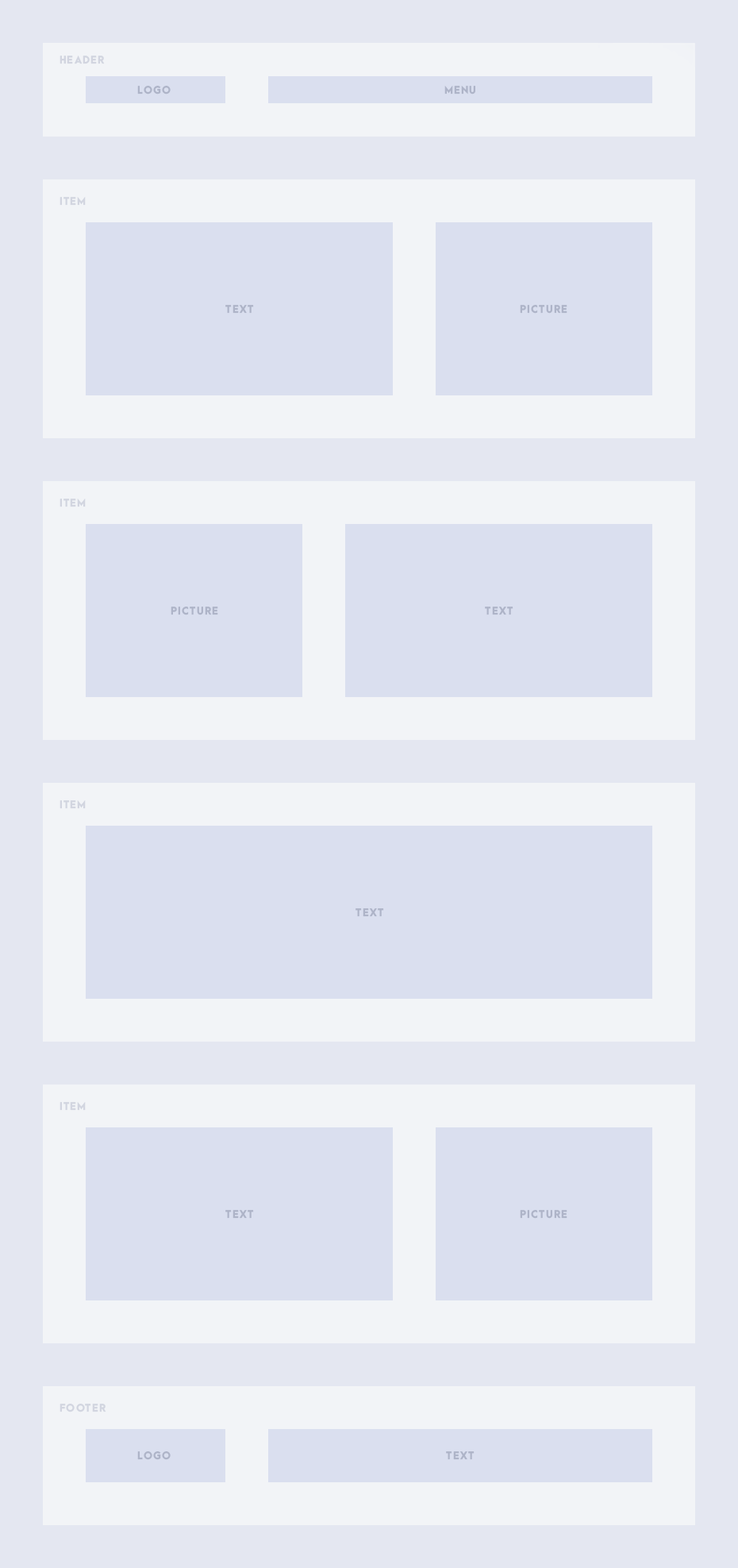
<style>
.page{position:relative;width:738px;height:1568px;background:#dadfef}
.page>*{position:absolute;margin:0}
.t1{font:9.5px "ArcaMajora3-Heavy";letter-spacing:0.1em;color:#d2d5e0}
.t2{font:9.5px "ArcaMajora3-Heavy";letter-spacing:0.1em;color:#aeb4c8}
.t3{font:11.1px "ArcaMajora3-Heavy";letter-spacing:0.1em;color:#aeb4c8}
</style>
<div class="page">
<p class="t1" style="left:60px;top:56px;width:45px;height:8px">HEADER</p>
<p class="t2" style="left:137px;top:86px;width:34px;height:8px">LOGO</p>
<p class="t2" style="left:445px;top:86px;width:31px;height:8px"><span class="t3"><br><br></span>MENU</p>
<p class="t1" style="left:60px;top:197px;width:26px;height:9px">ITEM</p>
<p class="t2" style="left:225px;top:305px;width:29px;height:9px">TEXT</p>
<p class="t2" style="left:520px;top:305px;width:48px;height:9px">PICTURE</p>
<p class="t1" style="left:60px;top:499px;width:26px;height:8px">ITEM</p>
<p class="t2" style="left:171px;top:607px;width:47px;height:8px">PICTURE</p>
<p class="t2" style="left:485px;top:607px;width:29px;height:8px">TEXT</p>
<p class="t1" style="left:60px;top:800px;width:26px;height:9px">ITEM</p>
<p class="t2" style="left:356px;top:908px;width:28px;height:9px">TEXT</p>
<p class="t1" style="left:60px;top:1102px;width:26px;height:9px">ITEM</p>
<p class="t2" style="left:225px;top:1210px;width:29px;height:9px">TEXT</p>
<p class="t2" style="left:520px;top:1210px;width:48px;height:9px">PICTURE</p>
<p class="t1" style="left:60px;top:1404px;width:46px;height:8px">FOOTER</p>
<p class="t2" style="left:137px;top:1451px;width:34px;height:9px">LOGO</p>
<p class="t2" style="left:446px;top:1451px;width:29px;height:9px"><span class="t3"><br><br></span>TEXT</p>
</div>
